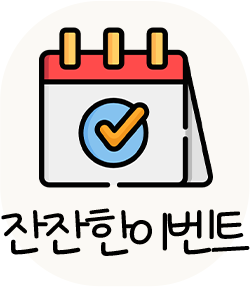
<style>
.page{position:relative;width:250px;height:287px;background:#fbf9f5}
.page>*{position:absolute;margin:0}
.t1{font:76.4px "GangwonEduSaeeumMedium";letter-spacing:-0.1em;color:#000000}
</style>
<div class="page">
<p class="t1" style="left:1px;top:208px;width:249px;height:48px">잔잔한이벤트</p>
</div>
